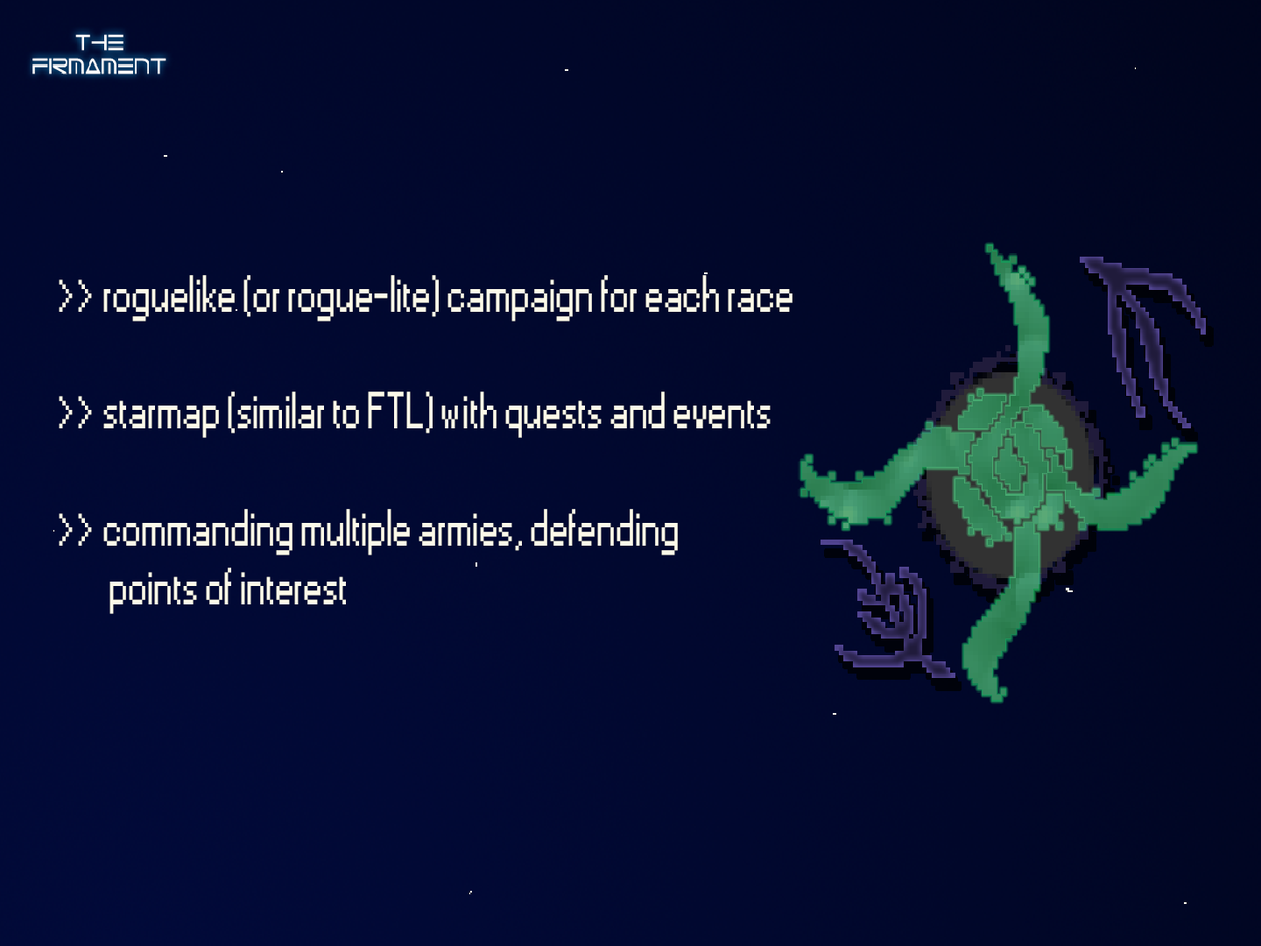
<style>
.page{position:relative;width:1261px;height:946px}
.page>*{position:absolute;margin:0}
.t1{font:48.7px "Small Fonts";color:#fcf9e9;scale:0.84 1}
</style>
<div class="page">
<p class="t1" style="left:59px;top:275px;width:733px;height:339px">&gt;&gt; roguelike (or rogue-lite) campaign for each race<br><br>&gt;&gt; starmap (similar to FTL) with quests and events<br><br>&gt;&gt; commanding multiple armies, defending <br>        points of interest</p>
</div>
